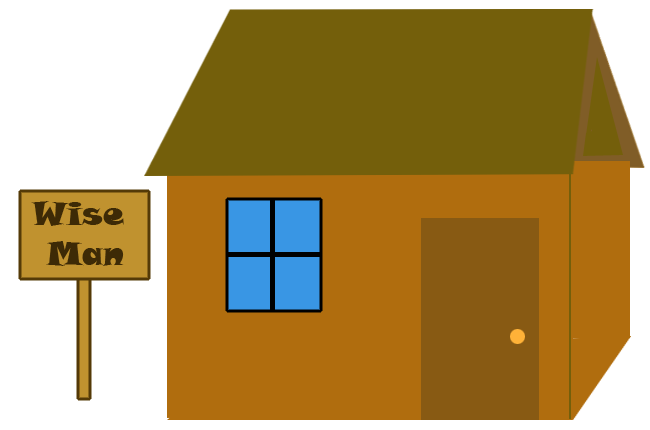
<style>
.page{position:relative;width:650px;height:430px;background:#ffffff}
.page>*{position:absolute;margin:0}
.t1{font:33.3px "SnapITC-Regular";color:#3d2a06}
</style>
<div class="page">
<p class="t1" style="left:31px;top:201px;width:93px;height:65px;text-align:center">Wise <br>Man</p>
</div>
